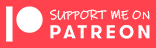
<style>
.page{position:relative;width:156px;height:48px;background:#ff424d}
.page>*{position:absolute;margin:0}
.t1{font:13px "InkFree";color:#ffffff}
</style>
<div class="page">
<p class="t1" style="left:50px;top:9px;width:100px;height:11px">SUPPORT ME ON</p>
</div>
